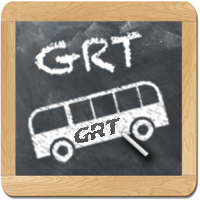
<style>
.page{position:relative;width:200px;height:200px}
.page>*{position:absolute;margin:0}
.t1{font:43.1px "Chalkduster";color:#ffffff}
</style>
<div class="page">
<p class="t1" style="left:33px;top:30px;width:109px;height:46px;rotate:-7deg">GRT</p>
</div>
